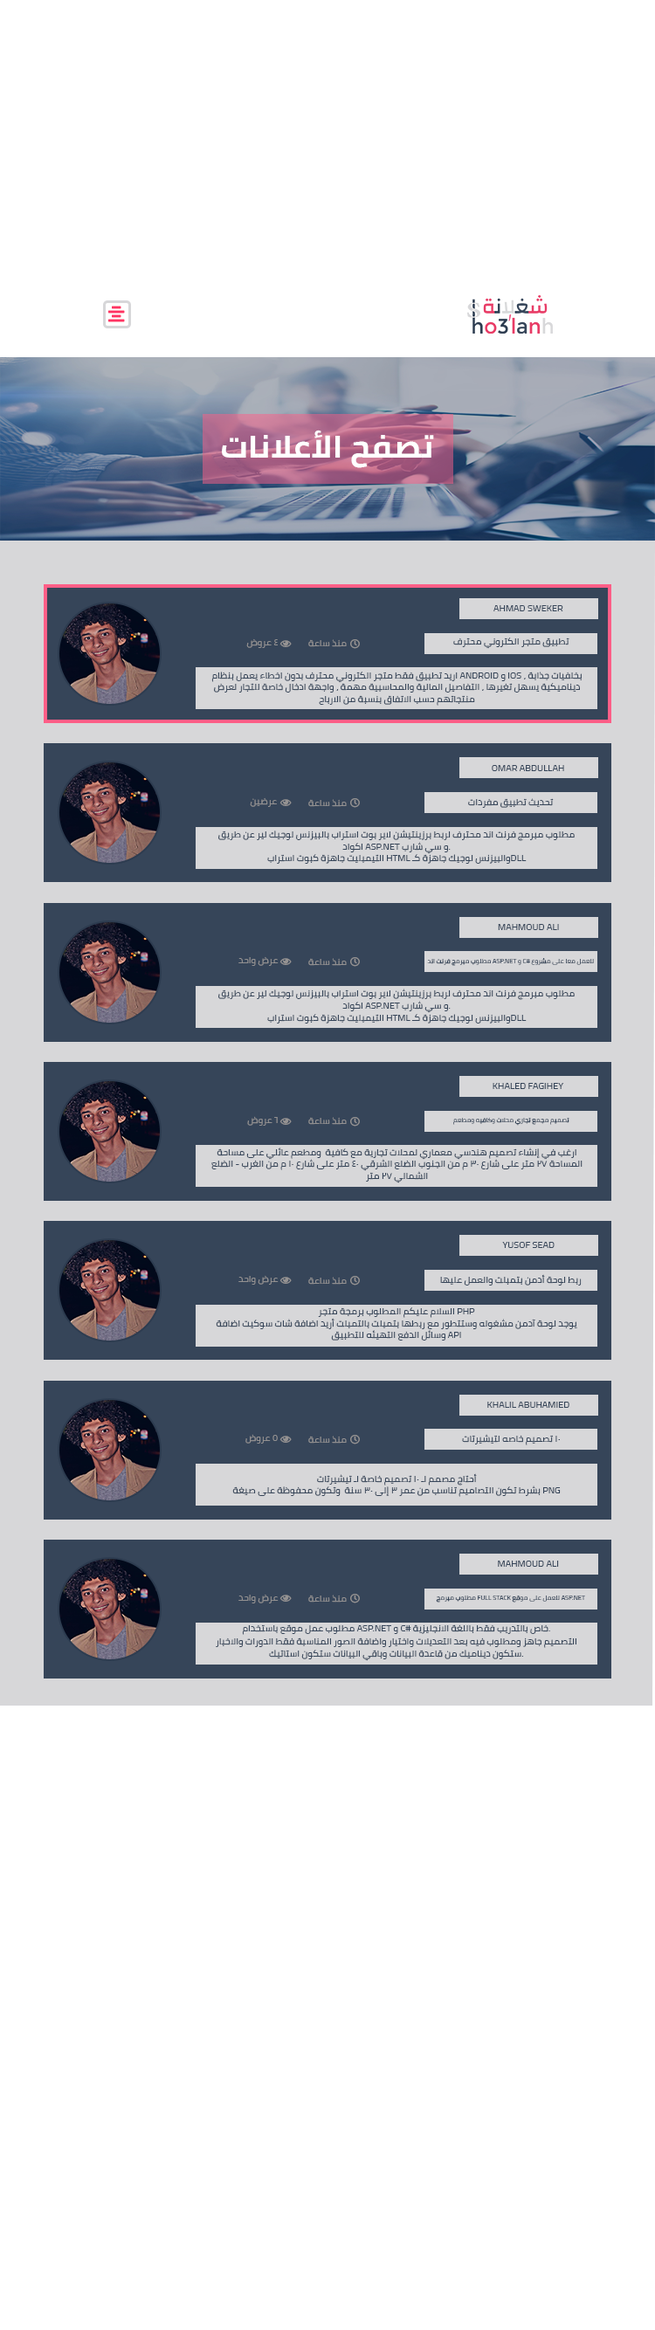
<style>
.page{position:relative;width:655px;height:2330px;background:#ffffff}
.page>*{position:absolute;margin:0}
.t1{font:31.4px "Cairo-Bold";color:#ffffff;text-transform:uppercase;scale:1.06 1}
.t2{font:9px "Cairo";color:#364559;text-transform:uppercase;scale:1.06 1}
.t3{font:9px "Cairo";color:#949292;text-transform:uppercase;scale:1.06 1}
.t4{font:9px/11.9px "Cairo";color:#364559;text-transform:uppercase;scale:1.06 1}
.t5{font:6.2px "Cairo";color:#364559;text-transform:uppercase;scale:1.06 1}
.t6{font:9px/6.4px "Cairo";color:#364559;text-transform:uppercase;scale:1.06 1}
</style>
<div class="page">
<p class="t1" style="left:222px;top:430px;width:212px;height:38px">تصفح الأعلانات</p>
<p class="t2" style="left:493px;top:605px;width:70px;height:6px">ahmad sweker</p>
<p class="t3" style="left:246px;top:638px;width:32px;height:10px">4 عروض</p>
<p class="t3" style="left:308px;top:639px;width:39px;height:8px">منذ ساعة</p>
<p class="t2" style="left:453px;top:638px;width:116px;height:11px">تطبيق متجر الكتروني محترف</p>
<p class="t4" style="left:211px;top:672px;width:371px;height:34px;text-align:center">اريد تطبيق فقط متجر الكتروني محترف بدون اخطاء يعمل بنظام android و ios ، بخلفيات جذابة ديناميكية يسهل تغيرها ، التفاصيل المالية والمحاسبية مهمة ، واجهة ادخال خاصة للتجار لعرض منتجاتهم حسب الاتفاق بنسبة من الارباح</p>
<p class="t2" style="left:492px;top:765px;width:72px;height:6px">omar abdullah</p>
<p class="t3" style="left:250px;top:797px;width:27px;height:10px">عرضين</p>
<p class="t3" style="left:308px;top:799px;width:39px;height:8px">منذ ساعة</p>
<p class="t2" style="left:468px;top:798px;width:86px;height:10px">تحديث تطبيق مفردات</p>
<p class="t4" style="left:218px;top:830px;width:357px;height:34px;text-align:center">مطلوب مبرمج فرنت اند محترف لربط برزينتيشن لاير بوت استراب بالبيزنس لوجيك لير عن طريق اكواد asp.net و سي شارب.<br>التيمبليت جاهزة كبوت استراب html والبيزنس لوجيك جاهزة كـdll</p>
<p class="t2" style="left:498px;top:924px;width:61px;height:6px">Mahmoud Ali</p>
<p class="t3" style="left:238px;top:956px;width:41px;height:10px">عرض واحد</p>
<p class="t3" style="left:308px;top:958px;width:39px;height:8px">منذ ساعة</p>
<p class="t5" style="left:427px;top:958px;width:167px;height:8px">مطلوب مبرمج فرنت اند ASP.Net و C# للعمل معا على مشروع</p>
<p class="t4" style="left:218px;top:989px;width:357px;height:35px;text-align:center">مطلوب مبرمج فرنت اند محترف لربط برزينتيشن لاير بوت استراب بالبيزنس لوجيك لير عن طريق اكواد asp.net و سي شارب.<br>التيمبليت جاهزة كبوت استراب html والبيزنس لوجيك جاهزة كـdll</p>
<p class="t2" style="left:493px;top:1083px;width:71px;height:6px">khaled fagihey</p>
<p class="t3" style="left:247px;top:1116px;width:31px;height:10px">6 عروض</p>
<p class="t3" style="left:308px;top:1117px;width:39px;height:8px">منذ ساعة</p>
<p class="t5" style="left:453px;top:1118px;width:116px;height:8px">تصميم مجمع تجاري محلات وكافيه ومطعم</p>
<p class="t4" style="left:211px;top:1148px;width:372px;height:35px;text-align:center">ارغب في إنشاء تصميم هندسي معماري لمحلات تجارية مع كافية  ومطعم عائلي على مساحة المساحة 27 متر على شارع 30 م من الجنوب الضلع الشرقي 40 متر على شارع 10 م من الغرب - الضلع الشمالي 27 متر</p>
<p class="t2" style="left:502px;top:1242px;width:53px;height:6px">yusof sead</p>
<p class="t3" style="left:238px;top:1275px;width:41px;height:10px">عرض واحد</p>
<p class="t3" style="left:308px;top:1277px;width:39px;height:8px">منذ ساعة</p>
<p class="t2" style="left:440px;top:1274px;width:142px;height:12px">ربط لوحة أدمن بتمبلت والعمل عليها</p>
<p class="t4" style="left:216px;top:1307px;width:361px;height:34px;text-align:center">السلام عليكم المطلوب برمجة متجر php<br>يوجد لوحة آدمن مشغوله وستتطور مع ربطها بتمبلت بالتمبلت أريد اضافة شات سوكيت اضافة وسائل الدفع التهيئه للتطبيق api</p>
<p class="t2" style="left:487px;top:1402px;width:82px;height:6px">khalil abuhamied</p>
<p class="t3" style="left:245px;top:1434px;width:33px;height:10px">5 عروض</p>
<p class="t3" style="left:308px;top:1436px;width:39px;height:8px">منذ ساعة</p>
<p class="t2" style="left:462px;top:1434px;width:98px;height:11px">10 تصميم خاصه لتيشيرتات</p>
<p class="t4" style="left:232px;top:1473px;width:329px;height:24px;text-align:center">أحتاج مصمم لـ 10 تصميم خاصة لـ تيشيرتات<br>بشرط تكون التصاميم تناسب من عمر 3 إلى 30 سنة  وتكون محفوظة على صيغة png</p>
<p class="t2" style="left:498px;top:1561px;width:61px;height:6px">Mahmoud Ali</p>
<p class="t3" style="left:238px;top:1594px;width:41px;height:10px">عرض واحد</p>
<p class="t3" style="left:308px;top:1595px;width:39px;height:8px">منذ ساعة</p>
<p class="t5" style="left:436px;top:1596px;width:149px;height:7px">مطلوب مبرمج full stack للعمل على موقع asp.net</p>
<p class="t6" style="left:216px;top:1625px;width:360px;height:36px;text-align:center">مطلوب عمل موقع باستخدام asp.net و c# خاص بالتدريب فقط باللغة الانجليزية.<br><br>التصميم جاهز ومطلوب فيه بعد التعديلات واختيار واضافة الصور المناسبة فقط الدورات والاخبار <br><br>ستكون ديناميك من قاعدة البيانات وباقي البيانات ستكون استاتيك.</p>
</div>
